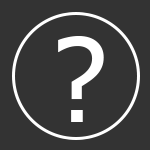
<style>
.page{position:relative;width:150px;height:150px;background:#333333}
.page>*{position:absolute;margin:0}
.t1{font:116px "Tahoma";color:#ffffff}
</style>
<div class="page">
<p class="t1" style="left:58px;top:36px;width:46px;height:86px">?</p>
</div>
